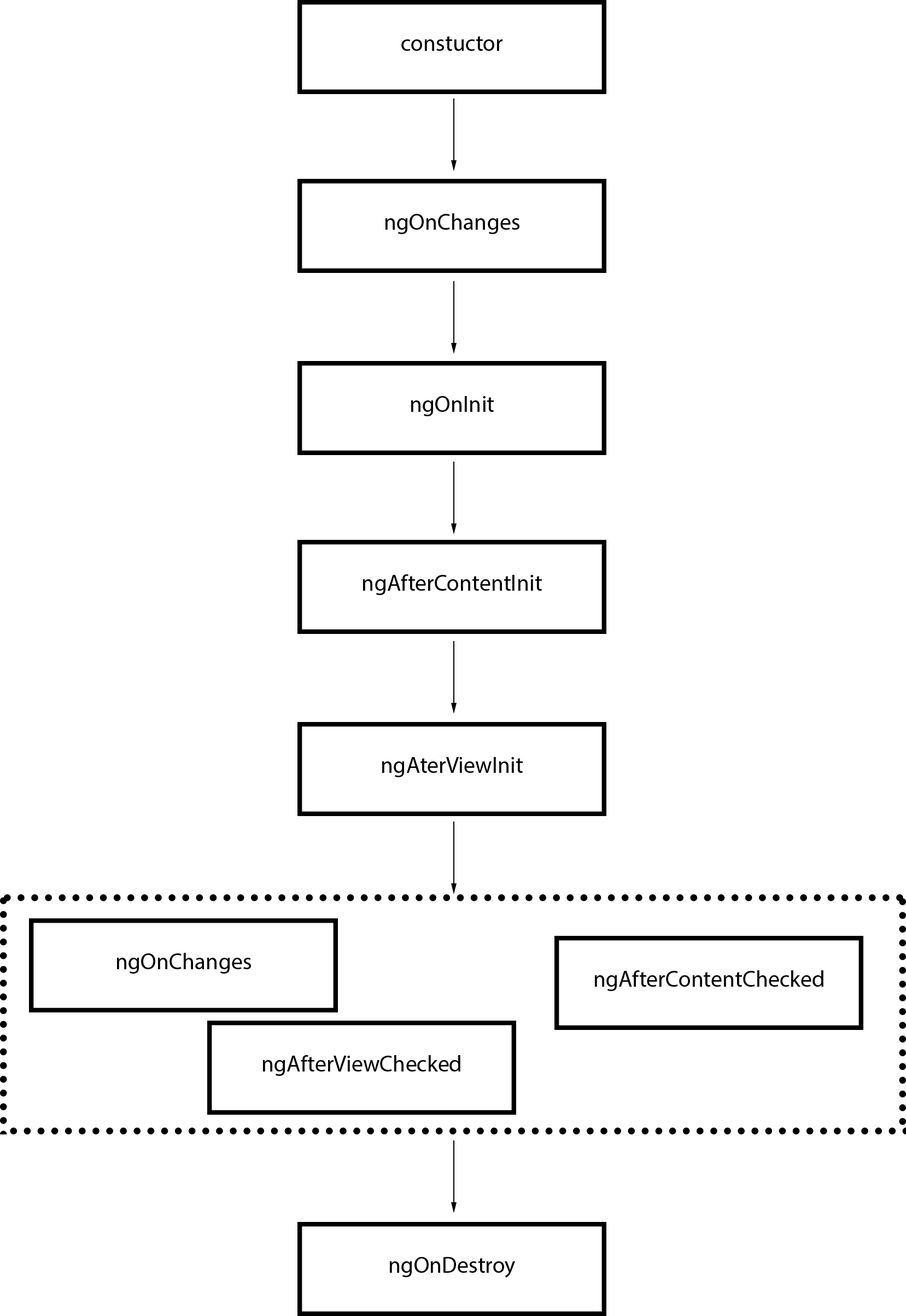
<style>
.page{position:relative;width:906px;height:1316px;background:#ffffff}
.page>*{position:absolute;margin:0}
.t1{font:22.8px "MyriadPro-Regular";color:#000000}
</style>
<div class="page">
<p class="t1" style="left:401px;top:36px;width:102px;height:15px">constuctor</p>
<p class="t1" style="left:385px;top:213px;width:135px;height:21px">ngOnChanges</p>
<p class="t1" style="left:411px;top:396px;width:83px;height:20px">ngOnInit</p>
<p class="t1" style="left:363px;top:574px;width:179px;height:21px">ngAfterContentInit</p>
<p class="t1" style="left:382px;top:757px;width:141px;height:20px">ngAterViewInit</p>
<p class="t1" style="left:116px;top:953px;width:135px;height:20px">ngOnChanges</p>
<p class="t1" style="left:594px;top:970px;width:230px;height:21px">ngAfterContentChecked</p>
<p class="t1" style="left:263px;top:1055px;width:197px;height:21px">ngAfterViewChecked</p>
<p class="t1" style="left:389px;top:1257px;width:126px;height:21px">ngOnDestroy</p>
</div>
